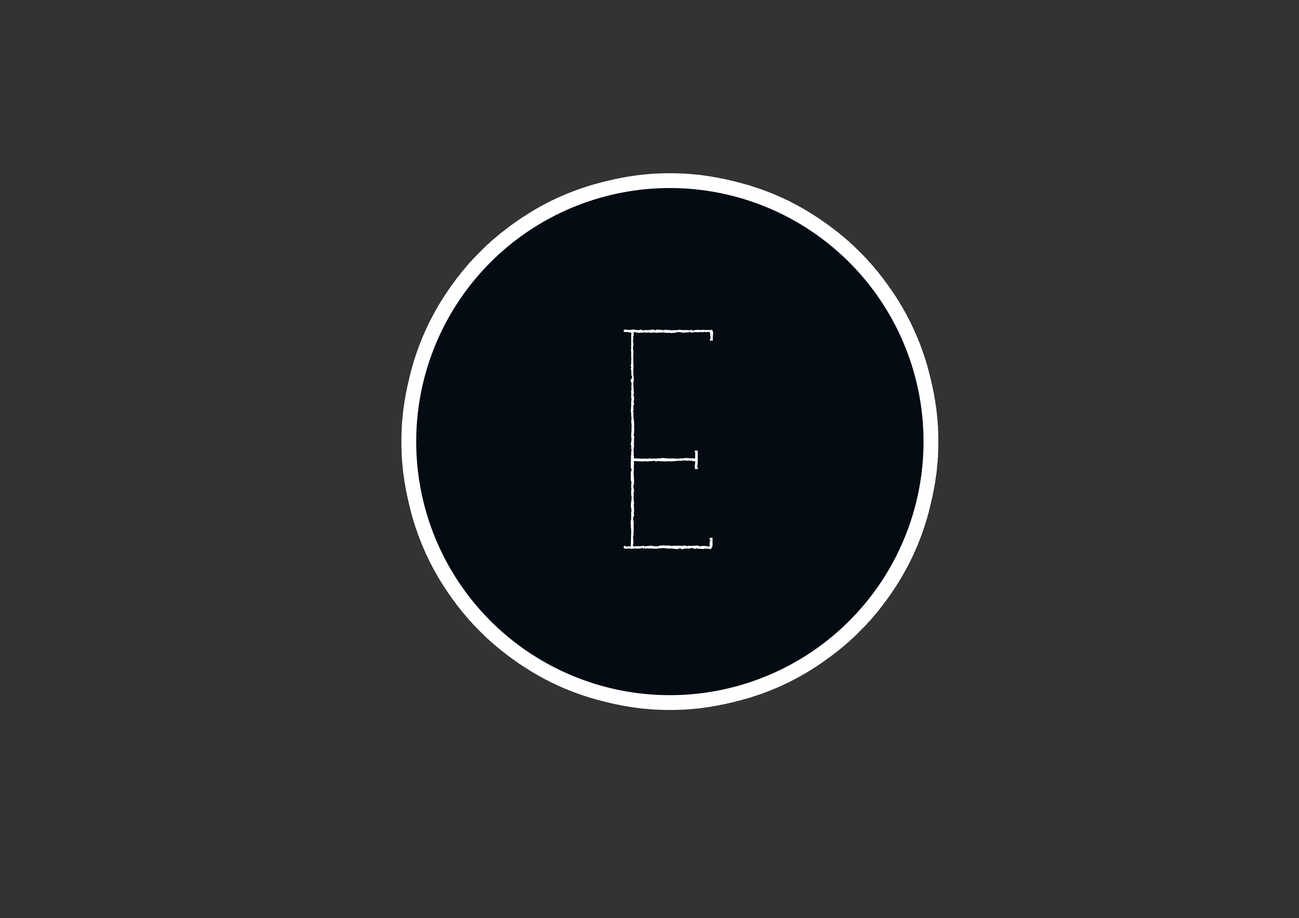
<style>
.page{position:relative;width:1299px;height:918px;background:#333333}
.page>*{position:absolute;margin:0}
.t1{font:351.7px "MatildeSketch";letter-spacing:0.021em;color:#ffffff}
</style>
<div class="page">
<p class="t1" style="left:623px;top:329px;width:90px;height:220px">E</p>
</div>
